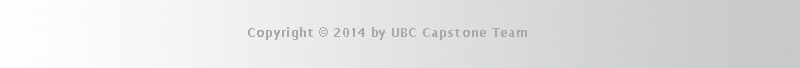
<style>
.page{position:relative;width:800px;height:68px}
.page>*{position:absolute;margin:0}
.t1{font:13px "LucidaSans-Demi";letter-spacing:0.025em;color:#aca8a8;scale:0.93 1}
.t2{font:13px "LucidaSans-Demi";letter-spacing:0.025em;color:#aca8a8;text-transform:uppercase;scale:0.93 1}
</style>
<div class="page">
<p class="t1" style="left:248px;top:27px;width:279px;height:13px"><span class="t2">C</span>opyright © 2014 by UBC Capstone Team</p>
</div>
